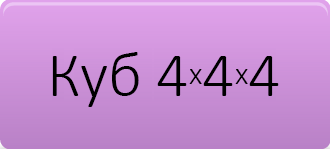
<style>
.page{position:relative;width:330px;height:149px}
.page>*{position:absolute;margin:0}
.t1{font:64px "Calibri-Light";color:#000000}
.t2{font:32px "Calibri-Light";color:#000000}
</style>
<div class="page">
<p class="t1" style="left:52px;top:52px;width:227px;height:55px">Куб 4<span class="t2">x</span>4<span class="t2">x</span>4</p>
</div>
